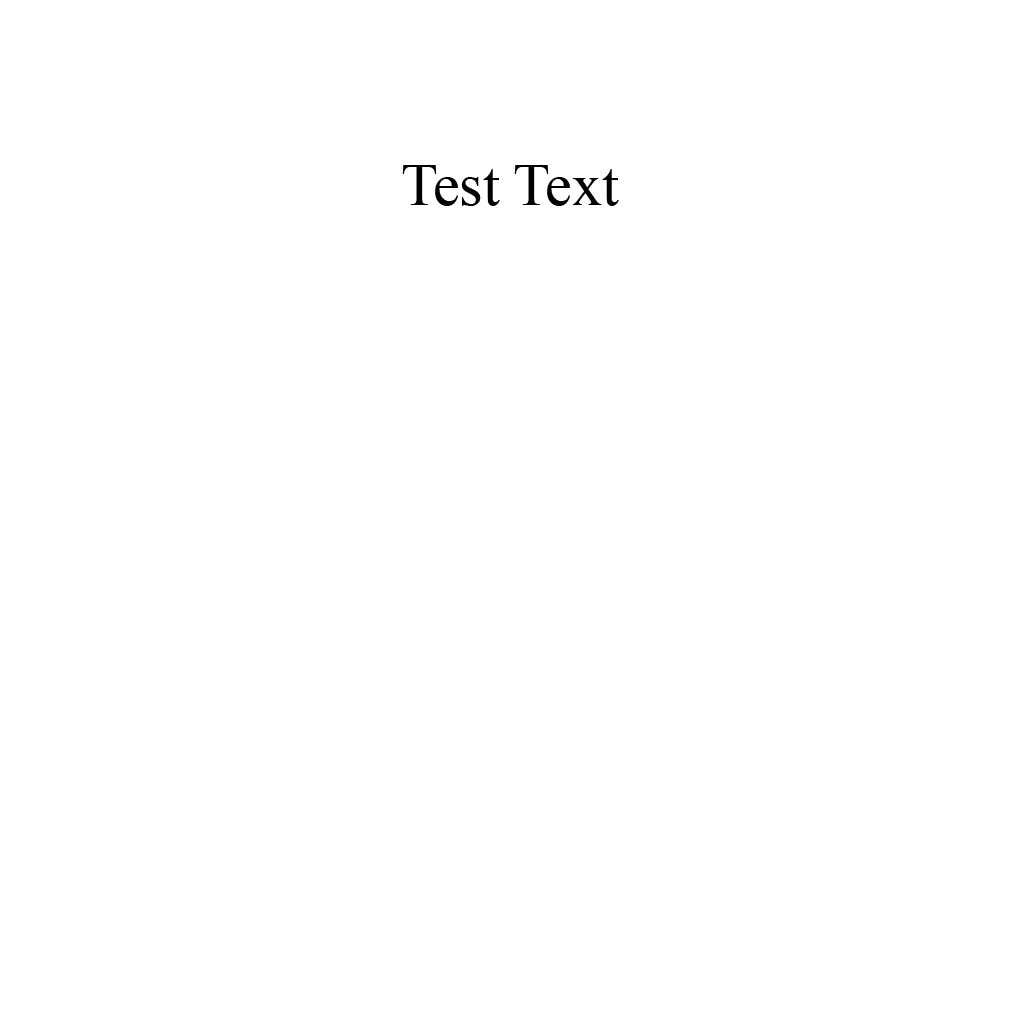
<style>
.page{position:relative;width:1024px;height:1024px;background:#ffffff}
.page>*{position:absolute;margin:0}
.t1{font:59.8px "TimesNewRomanPSMT";color:#000000}
</style>
<div class="page">
<p class="t1" style="left:402px;top:165px;width:217px;height:41px">Test Text</p>
</div>
